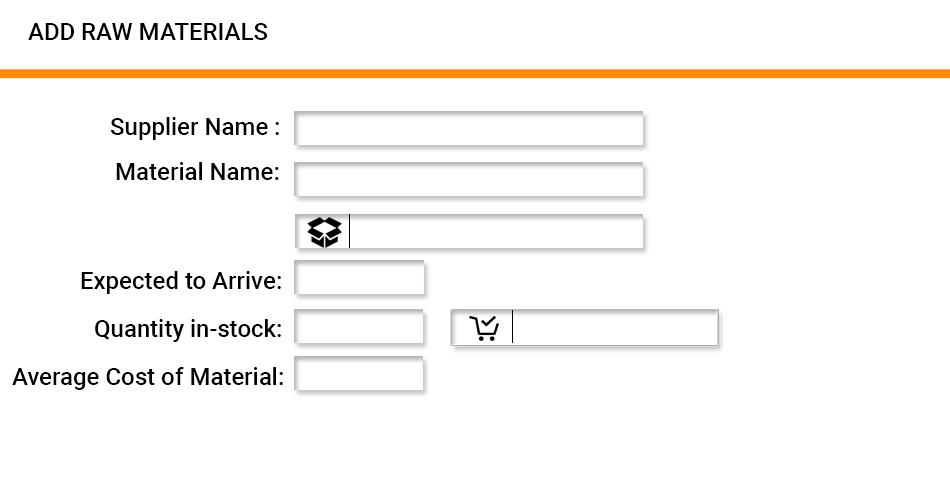
<style>
.page{position:relative;width:950px;height:500px;background:#ffffff}
.page>*{position:absolute;margin:0}
.t1{font:24px "Roboto-Medium";color:#000000}
</style>
<div class="page">
<p class="t1" style="left:28px;top:23px;width:240px;height:17px">ADD RAW MATERIALS</p>
<p class="t1" style="left:110px;top:117px;width:169px;height:23px">Supplier Name :</p>
<p class="t1" style="left:116px;top:162px;width:163px;height:18px">Material Name:</p>
<p class="t1" style="left:81px;top:271px;width:200px;height:23px">Expected to Arrive:</p>
<p class="t1" style="left:95px;top:319px;width:186px;height:23px">Quantity in-stock:</p>
<p class="t1" style="left:12px;top:367px;width:271px;height:23px">Average Cost of Material:</p>
</div>
